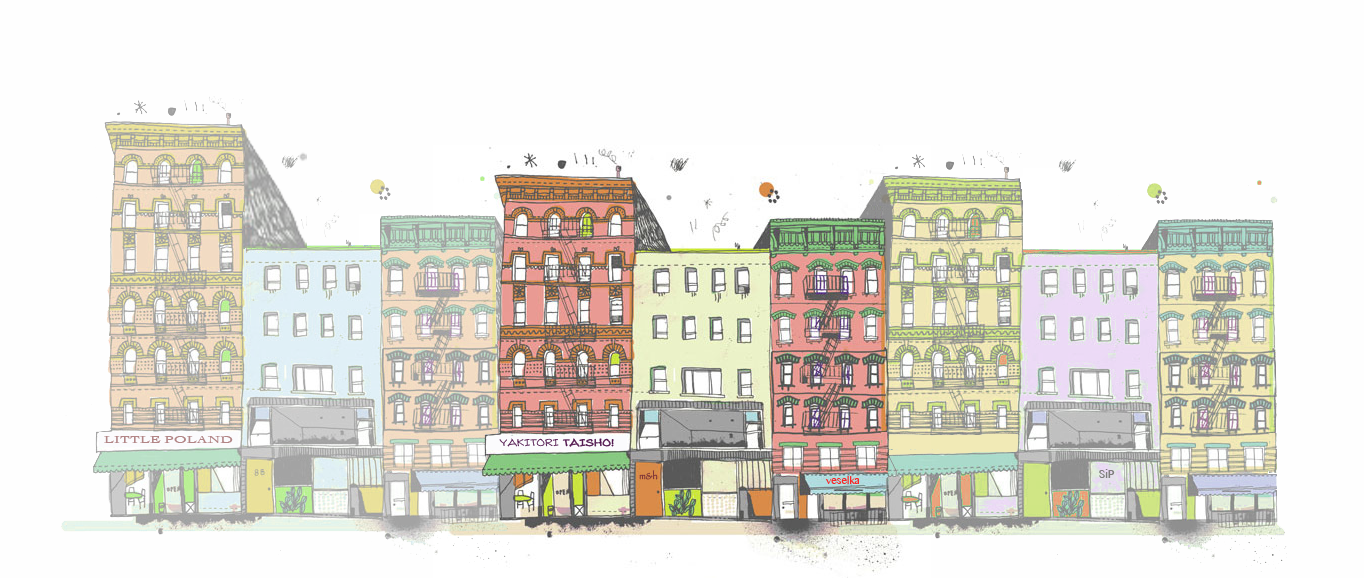
<style>
.page{position:relative;width:1364px;height:578px;background:#fefefe}
.page>*{position:absolute;margin:0}
.t1{font:11px "Cochin";color:#b28586;scale:1.4 1}
.t2{font:10.9px "Rabiohead";color:#531850;scale:1.3 1}
.t3{font:10.9px "Rabiohead";color:#531850;font-weight:bold;scale:1.3 1}
.t4{font:8.9px "Papyrus";color:#813737}
.t5{font:16px "SinhalaMN";color:#7e7d7d}
.t6{font:14px "SinhalaMN";color:#f92626}
</style>
<div class="page">
<p class="t1" style="left:104px;top:436px;width:129px;height:7px">LITTLE POLAND</p>
<p class="t2" style="left:499px;top:438px;width:115px;height:9px">YAKITORI <span class="t3">TAISHO!</span></p>
<p class="t4" style="left:639px;top:470px;width:19px;height:10px">m&amp;h</p>
<p class="t5" style="left:1099px;top:469px;width:16px;height:9px">SiP</p>
<p class="t6" style="left:825px;top:476px;width:34px;height:8px">veselka</p>
</div>
